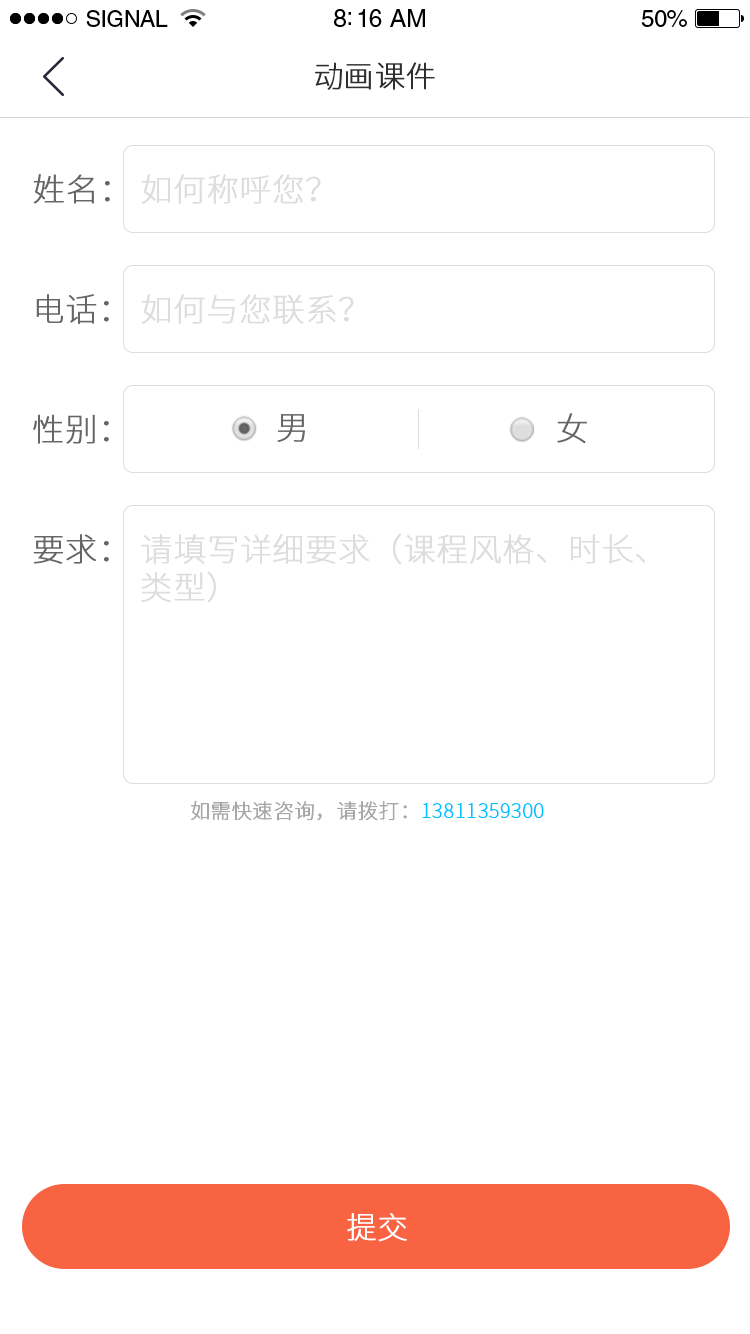
<style>
.page{position:relative;width:750px;height:1334px;background:#ffffff}
.page>*{position:absolute;margin:0}
.t1{font:23px "HelveticaLTStd-Roman";letter-spacing:-0.02em;color:#000000}
.t2{font:25px "HelveticaLTStd-Roman";letter-spacing:-0.02em;color:#000000}
.t3{font:24px "HelveticaLTStd-Roman";letter-spacing:-0.02em;color:#000000}
.t4{font:30px "SourceHanSansCN-ExtraLight";color:#2e2e2e;font-weight:bold}
.t5{font:32px "SourceHanSansCN-ExtraLight";color:#666666;font-weight:bold}
.t6{font:32px "SourceHanSansCN-ExtraLight";color:#dddddd;font-weight:bold}
.t7{font:20px "SourceHanSansCN-ExtraLight";color:#a8a8a8;font-weight:bold}
.t8{font:20px "SourceHanSansCN-ExtraLight";color:#00c3ff;font-weight:bold}
.t9{font:30px "SourceHanSansCN-ExtraLight";color:#fffefe;font-weight:bold}
</style>
<div class="page">
<p class="t1" style="left:86px;top:10px;width:82px;height:17px">SIGNAL</p>
<p class="t2" style="left:334px;top:9px;width:91px;height:18px">8:16 AM</p>
<p class="t3" style="left:641px;top:10px;width:46px;height:17px">50%</p>
<p class="t4" style="left:315px;top:62px;width:120px;height:28px">动画课件</p>
<p class="t5" style="left:33px;top:174px;width:77px;height:30px">姓名：</p>
<p class="t6" style="left:141px;top:174px;width:180px;height:30px">如何称呼您？</p>
<p class="t5" style="left:36px;top:294px;width:73px;height:30px">电话：</p>
<p class="t6" style="left:141px;top:294px;width:213px;height:30px">如何与您联系？</p>
<p class="t5" style="left:33px;top:414px;width:76px;height:30px">性别：</p>
<p class="t5" style="left:277px;top:414px;width:28px;height:28px">男</p>
<p class="t5" style="left:557px;top:413px;width:30px;height:30px">女</p>
<p class="t5" style="left:33px;top:534px;width:76px;height:30px">要求：</p>
<p class="t6" style="left:141px;top:533px;width:505px;height:70px">请填写详细要求（课程风格、时长、<br>类型）</p>
<p class="t7" style="left:191px;top:800px;width:353px;height:21px">如需快速咨询，请拨打：<span class="t8">13811359300</span></p>
<p class="t9" style="left:347px;top:1213px;width:60px;height:29px">提交</p>
</div>
